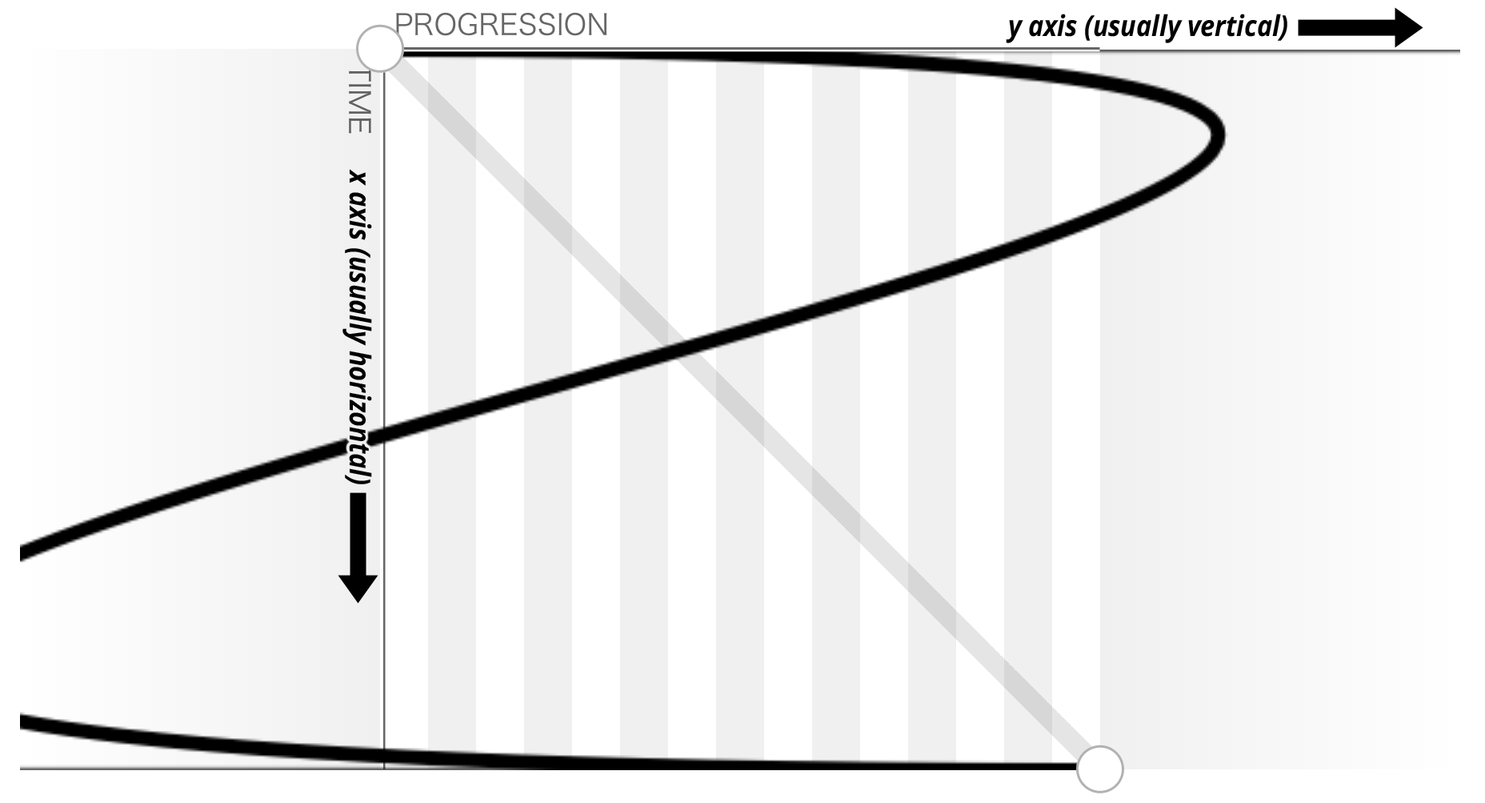
<style>
.page{position:relative;width:1485px;height:803px;background:#ffffff}
.page>*{position:absolute;margin:0}
.t1{font:28.8px "OpenSans-BoldItalic";color:#000000;scale:0.9 1}
</style>
<div class="page">
<p class="t1" style="left:1006px;top:14px;width:282px;height:29px">y axis (usually vertical)</p>
<p class="t1" style="left:343px;top:169px;width:29px;height:315px;rotate:90deg">x axis (usually horizontal)</p>
</div>
